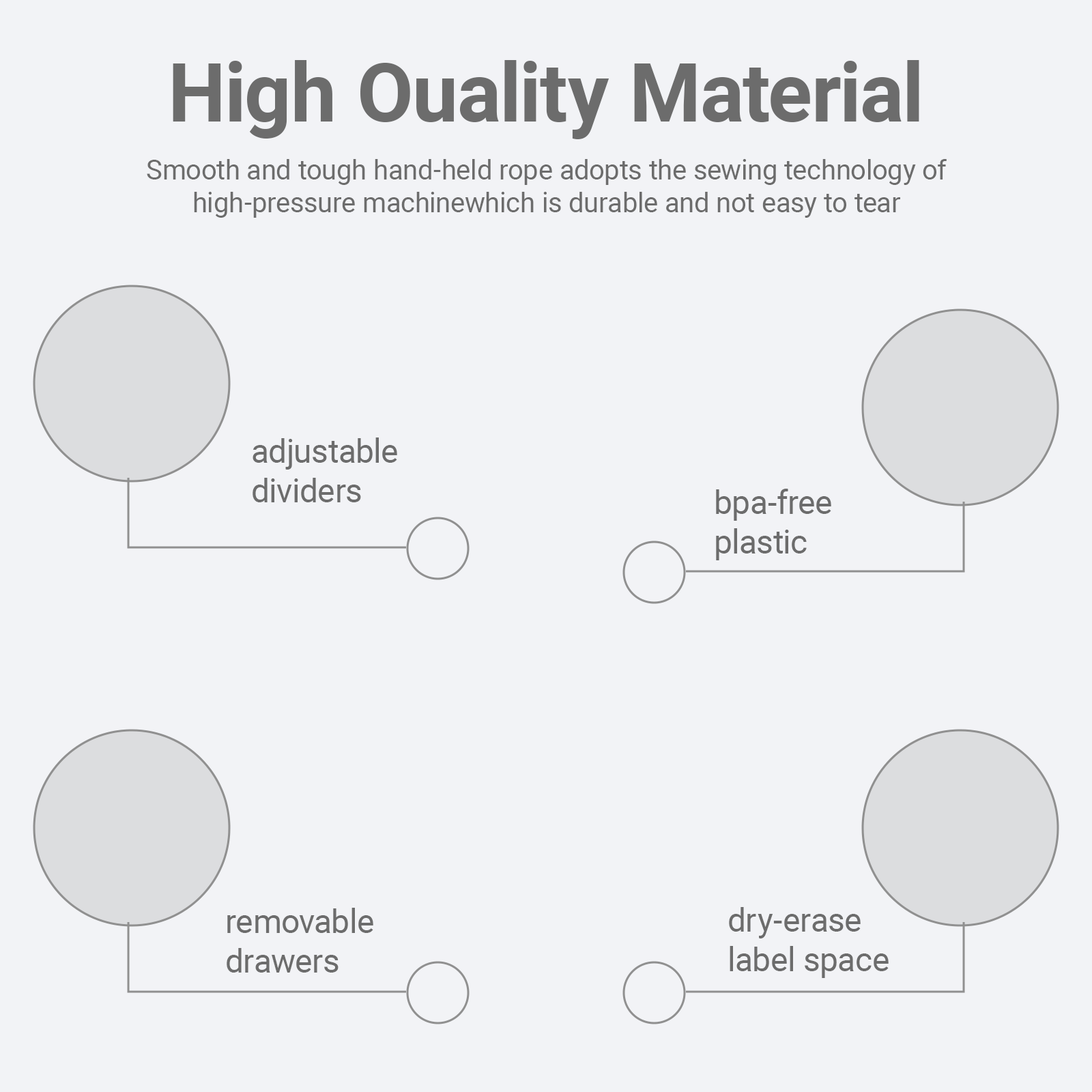
<style>
.page{position:relative;width:1092px;height:1092px;background:#f2f3f6}
.page>*{position:absolute;margin:0}
.t1{font:81.9px "Roboto-Bold";color:#6c6c6c}
.t2{font:27.3px "Roboto-Regular";color:#6c6c6c}
.t3{font:32.8px "Roboto-Regular";color:#6c6c6c}
</style>
<div class="page">
<p class="t1" style="left:173px;top:60px;width:746px;height:79px">High Ouality Material</p>
<p class="t2" style="left:147px;top:159px;width:800px;height:59px;text-align:center">Smooth and tough hand-held rope adopts the sewing technology of high-pressure machinewhich is durable and not easy to tear</p>
<p class="t3" style="left:253px;top:437px;width:144px;height:65px">adjustable<br>dividers</p>
<p class="t3" style="left:716px;top:489px;width:115px;height:71px">bpa-free<br>plastic</p>
<p class="t3" style="left:227px;top:908px;width:146px;height:65px">removable<br>drawers</p>
<p class="t3" style="left:729px;top:907px;width:160px;height:71px">dry-erase<br>label space</p>
</div>
